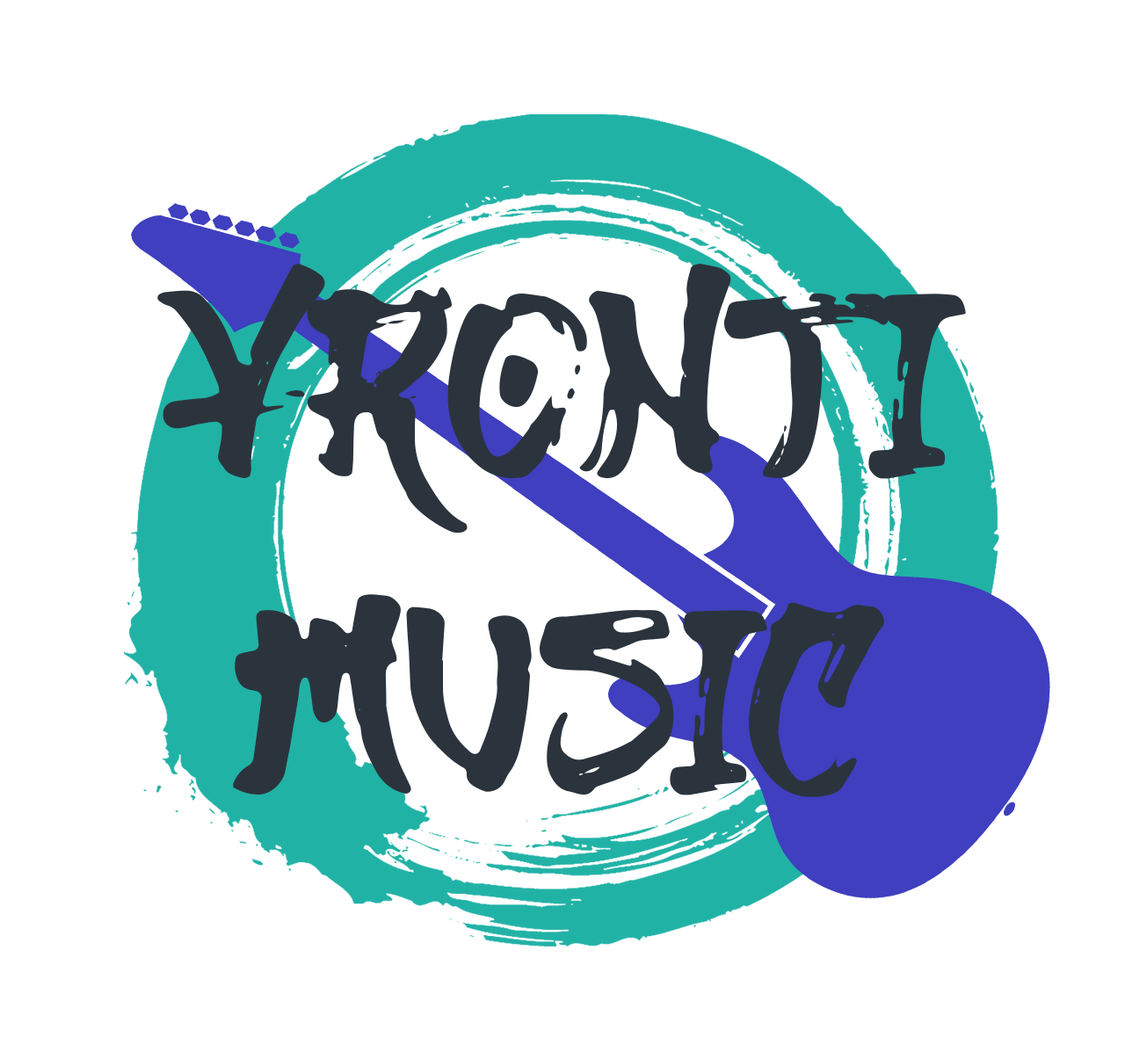
<style>
.page{position:relative;width:1125px;height:1060px;background:#ffffff}
.page>*{position:absolute;margin:0}
.t1{font:263.7px "Genjiro";color:#2b343d}
</style>
<div class="page">
<p class="t1" style="left:157px;top:264px;width:809px;height:533px;text-align:center">Yronti<br>Music</p>
</div>
